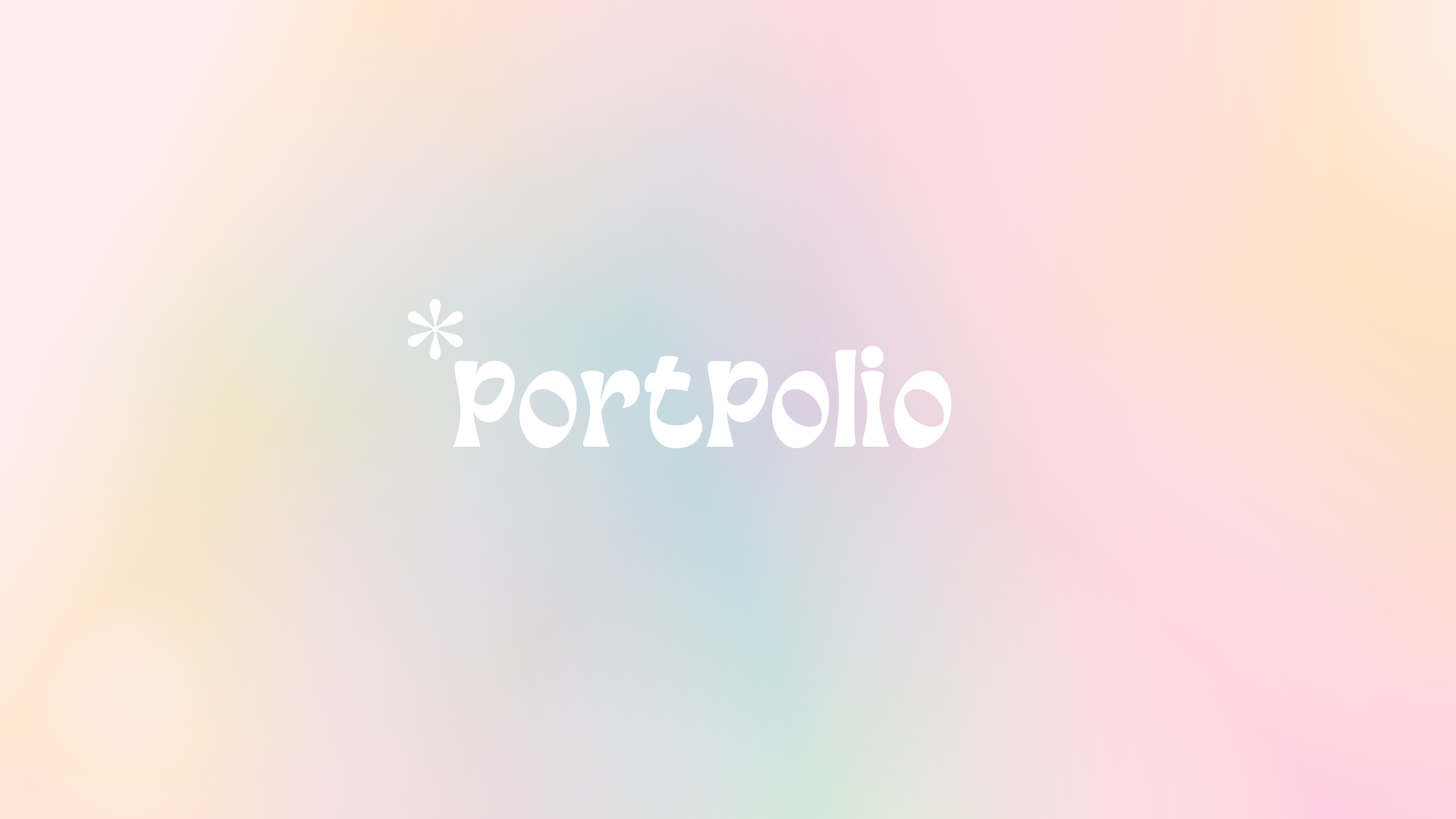
<style>
.page{position:relative;width:1456px;height:819px}
.page>*{position:absolute;margin:0}
.t1{font:113.7px "Machinkly";color:#ffffff}
</style>
<div class="page">
<p class="t1" style="left:453px;top:346px;width:499px;height:102px">PortPolio</p>
</div>
